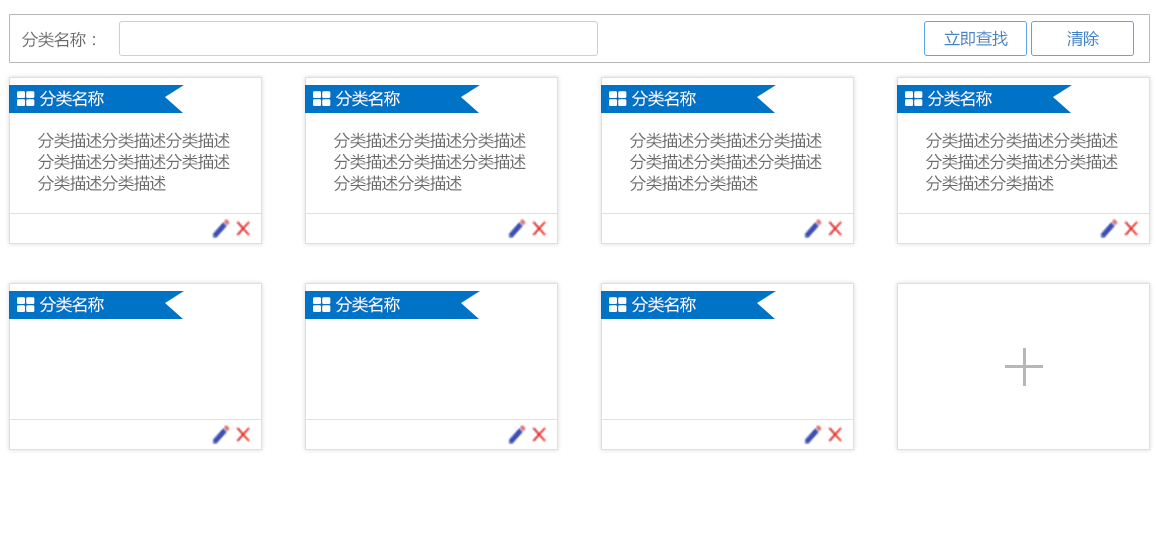
<style>
.page{position:relative;width:1157px;height:550px;background:#ffffff}
.page>*{position:absolute;margin:0}
.t1{font:16px "MicrosoftYaHei";color:#4283c5}
.t2{font:16px "MicrosoftYaHei";color:#696969}
.t3{font:16px "MicrosoftYaHei";color:#ffffff}
.t4{font:16px/21.3px "MicrosoftYaHei";color:#696969}
</style>
<div class="page">
<p class="t1" style="left:944px;top:30px;width:64px;height:17px">立即查找</p>
<p class="t1" style="left:1067px;top:30px;width:32px;height:17px">清除</p>
<p class="t2" style="left:22px;top:31px;width:73px;height:17px">分类名称：</p>
<p class="t3" style="left:40px;top:90px;width:64px;height:17px">分类名称</p>
<p class="t3" style="left:336px;top:90px;width:64px;height:17px">分类名称</p>
<p class="t3" style="left:632px;top:90px;width:64px;height:17px">分类名称</p>
<p class="t3" style="left:928px;top:90px;width:64px;height:17px">分类名称</p>
<p class="t4" style="left:38px;top:132px;width:192px;height:59px">分类描述分类描述分类描述<br>分类描述分类描述分类描述<br>分类描述分类描述</p>
<p class="t4" style="left:334px;top:132px;width:192px;height:59px">分类描述分类描述分类描述<br>分类描述分类描述分类描述<br>分类描述分类描述</p>
<p class="t4" style="left:630px;top:132px;width:192px;height:59px">分类描述分类描述分类描述<br>分类描述分类描述分类描述<br>分类描述分类描述</p>
<p class="t4" style="left:926px;top:132px;width:192px;height:59px">分类描述分类描述分类描述<br>分类描述分类描述分类描述<br>分类描述分类描述</p>
<p class="t3" style="left:40px;top:296px;width:64px;height:17px">分类名称</p>
<p class="t3" style="left:336px;top:296px;width:64px;height:17px">分类名称</p>
<p class="t3" style="left:632px;top:296px;width:64px;height:17px">分类名称</p>
</div>
